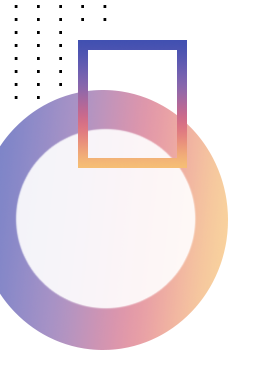
<style>
.page{position:relative;width:261px;height:368px;background:#ffffff}
.page>*{position:absolute;margin:0}
.t1{font:20px/13px "Anantason-MediumWd112";color:#000000}
</style>
<div class="page">
<p class="t1" style="left:14px;top:5px;width:93px;height:94px">.   .   .   .   .<br>.   .   .   .   .<br>.   .   .   <br>.   .   .<br>.   .   .<br>.   .   .<br>.   .   .<br>.   .</p>
</div>
